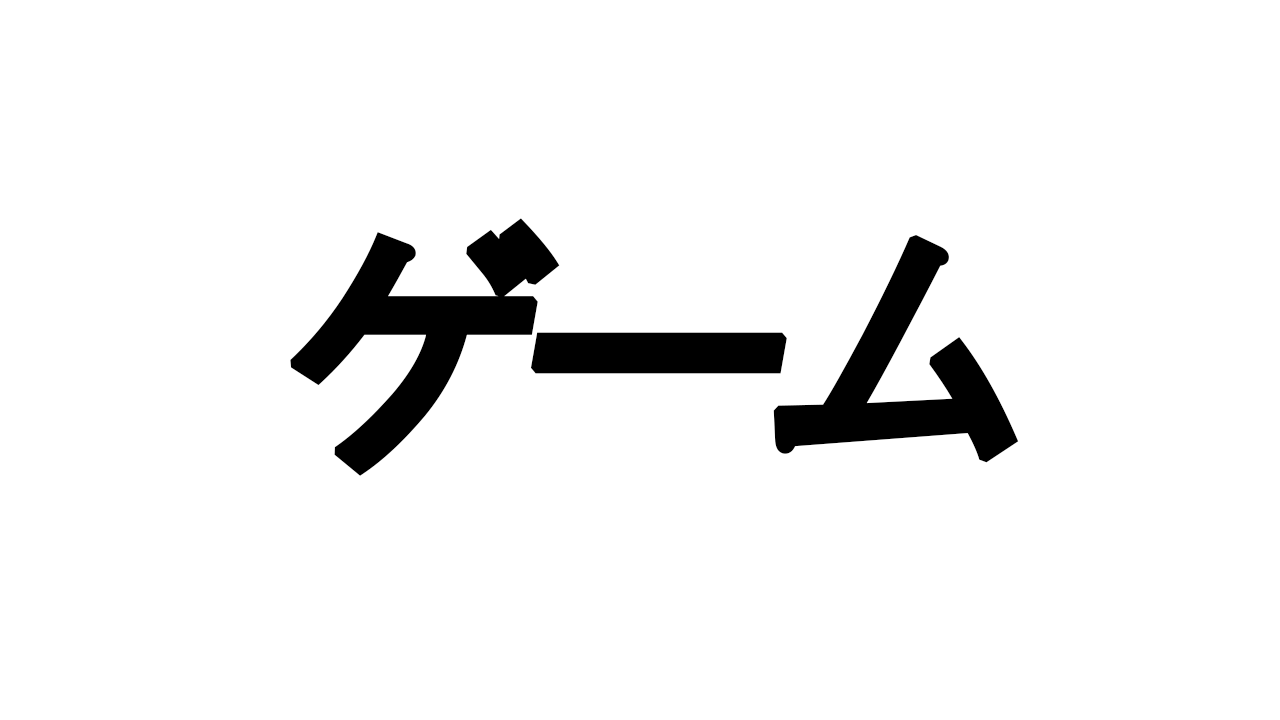
<style>
.page{position:relative;width:1280px;height:720px;background:#ffffff}
.page>*{position:absolute;margin:0}
.t1{font:266.8px "HGPGothicE";letter-spacing:-0.07em;color:#000000;font-weight:bold;font-style:italic}
</style>
<div class="page">
<p class="t1" style="left:290px;top:218px;width:729px;height:258px">ゲーム</p>
</div>
